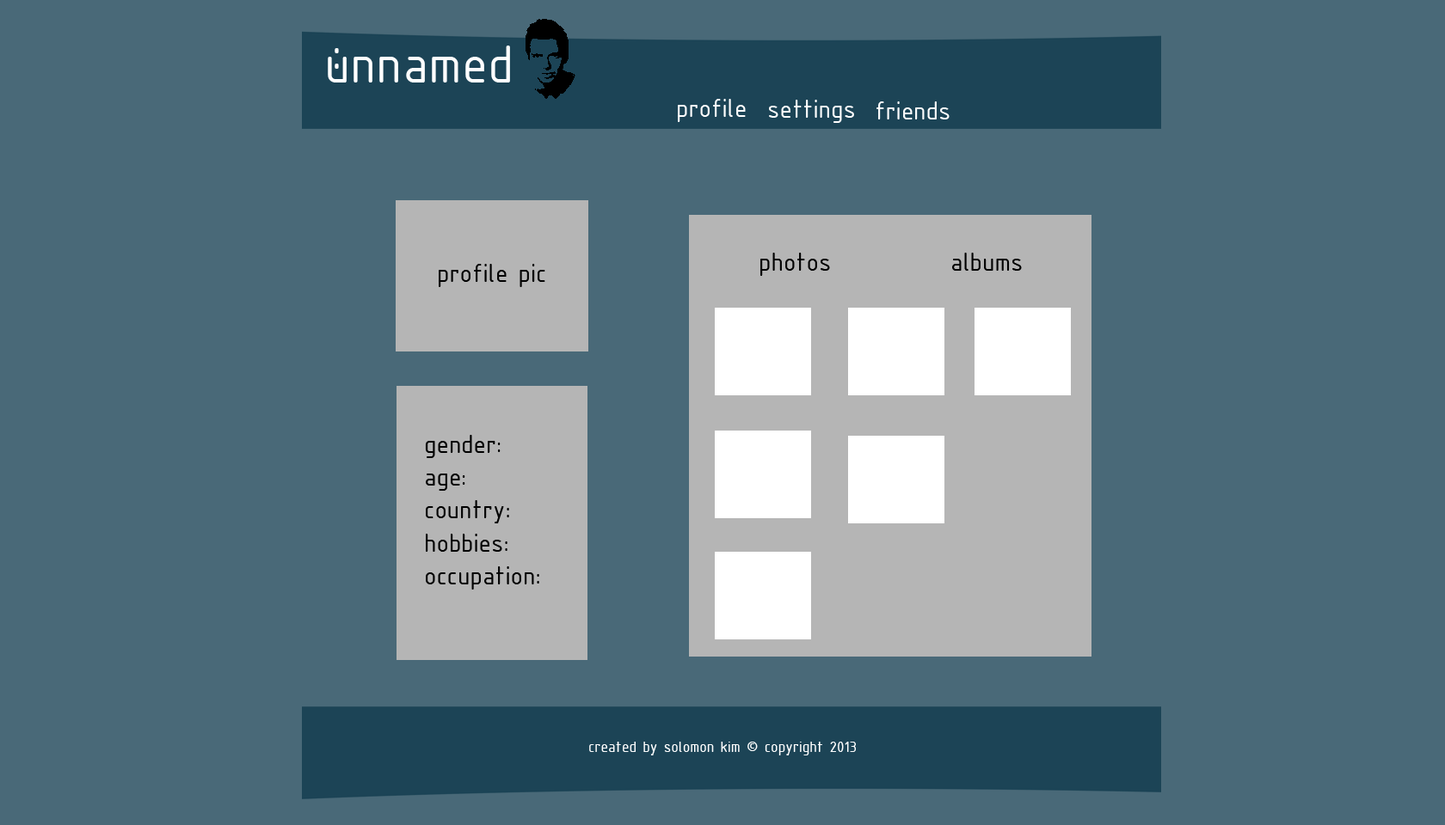
<style>
.page{position:relative;width:1445px;height:825px;background:#496978}
.page>*{position:absolute;margin:0}
.t1{font:57.8px "ISOCPEUR";color:#ffffff}
.t2{font:27.4px "ISOCPEUR";color:#ffffff}
.t3{font:27.4px "ISOCPEUR";color:#000000}
.t4{font:16.3px "ISOCPEUR";color:#ffffff}
</style>
<div class="page">
<p class="t1" style="left:328px;top:46px;width:182px;height:37px">unnamed</p>
<p class="t1" style="left:334px;top:48px;width:5px;height:21px">:</p>
<p class="t2" style="left:678px;top:99px;width:67px;height:23px">profile</p>
<p class="t2" style="left:769px;top:100px;width:85px;height:23px">settings</p>
<p class="t2" style="left:876px;top:101px;width:73px;height:19px">friends</p>
<p class="t3" style="left:760px;top:253px;width:70px;height:23px">photos</p>
<p class="t3" style="left:952px;top:253px;width:70px;height:18px">albums</p>
<p class="t3" style="left:439px;top:264px;width:106px;height:23px">profile pic</p>
<p class="t3" style="left:425px;top:435px;width:114px;height:155px">gender:<br>age:<br>country:<br>hobbies:<br>occupation:</p>
<p class="t4" style="left:589px;top:742px;width:267px;height:14px">created by solomon kim © copyright 2013</p>
</div>
